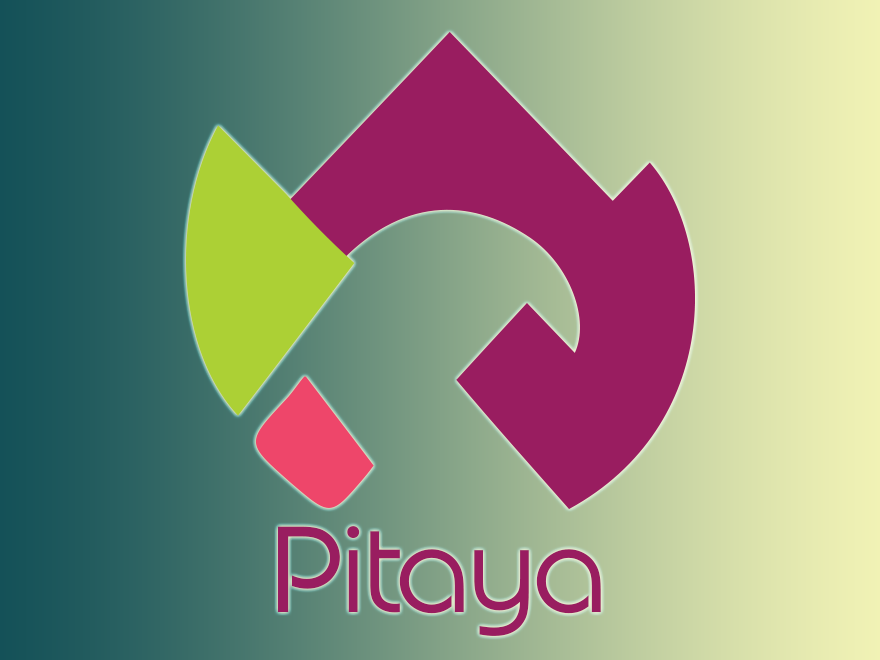
<style>
.page{position:relative;width:880px;height:660px}
.page>*{position:absolute;margin:0}
.t1{font:128px "PumpW01-Light";color:#991d60}
</style>
<div class="page">
<p class="t1" style="left:278px;top:526px;width:323px;height:110px">Pitaya</p>
</div>
